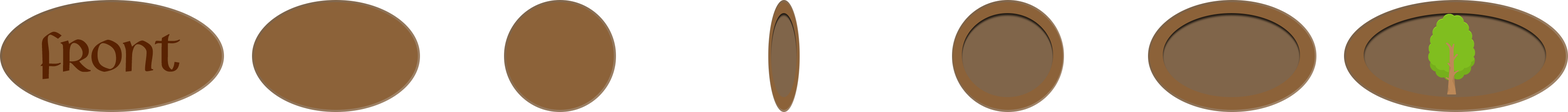
<style>
.page{position:relative;width:1568px;height:112px;background:#ffffff}
.page>*{position:absolute;margin:0}
.t1{font:56px "Livingstone";color:#592201}
</style>
<div class="page">
<p class="t1" style="left:40px;top:32px;width:140px;height:47px">front</p>
</div>
